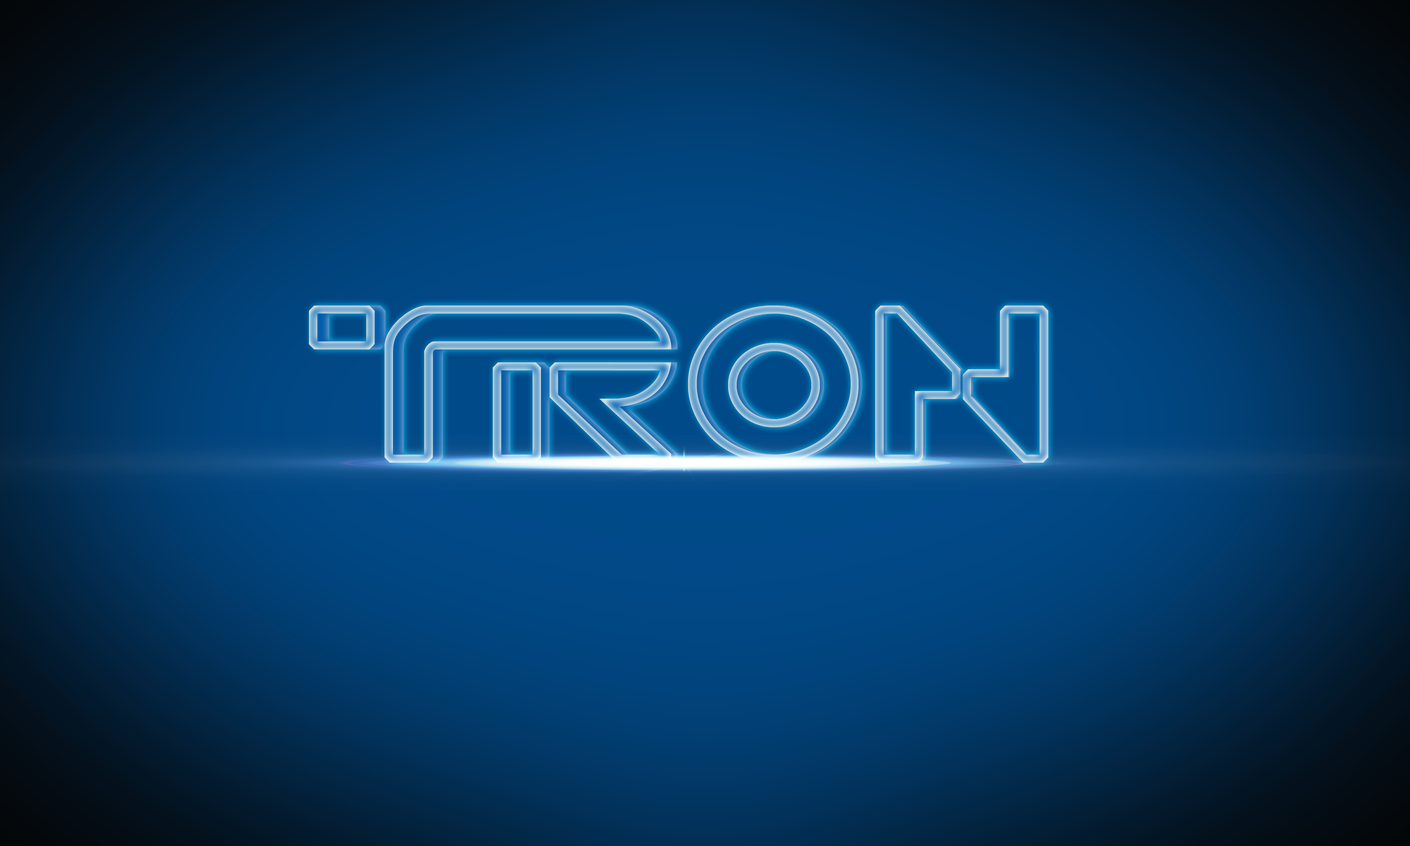
<style>
.page{position:relative;width:1410px;height:846px}
.page>*{position:absolute;margin:0}
.t1{font:224.4px "TRN";letter-spacing:0.05em;scale:1.06 1}
</style>
<div class="page">
<p class="t1" style="left:309px;top:306px;width:739px;height:157px">TRON</p>
</div>
